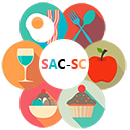
<style>
.page{position:relative;width:130px;height:130px;background:#ffffff}
.page>*{position:absolute;margin:0}
.t1{font:13px "MyanmarText-Bold";color:#000000}
.t2{font:13px "MyanmarText-Bold";color:#f55d66}
.t3{font:13px "MyanmarText-Bold";color:#05b9cc}
.t4{font:13px "MyanmarText-Bold";color:#f23314}
.t5{font:13px "MyanmarText-Bold";color:#fc9f4c}
</style>
<div class="page">
<p class="t1" style="left:41px;top:59px;width:45px;height:10px"><span class="t2">S</span><span class="t3">A</span>C-<span class="t4">S</span><span class="t5">C</span></p>
</div>
